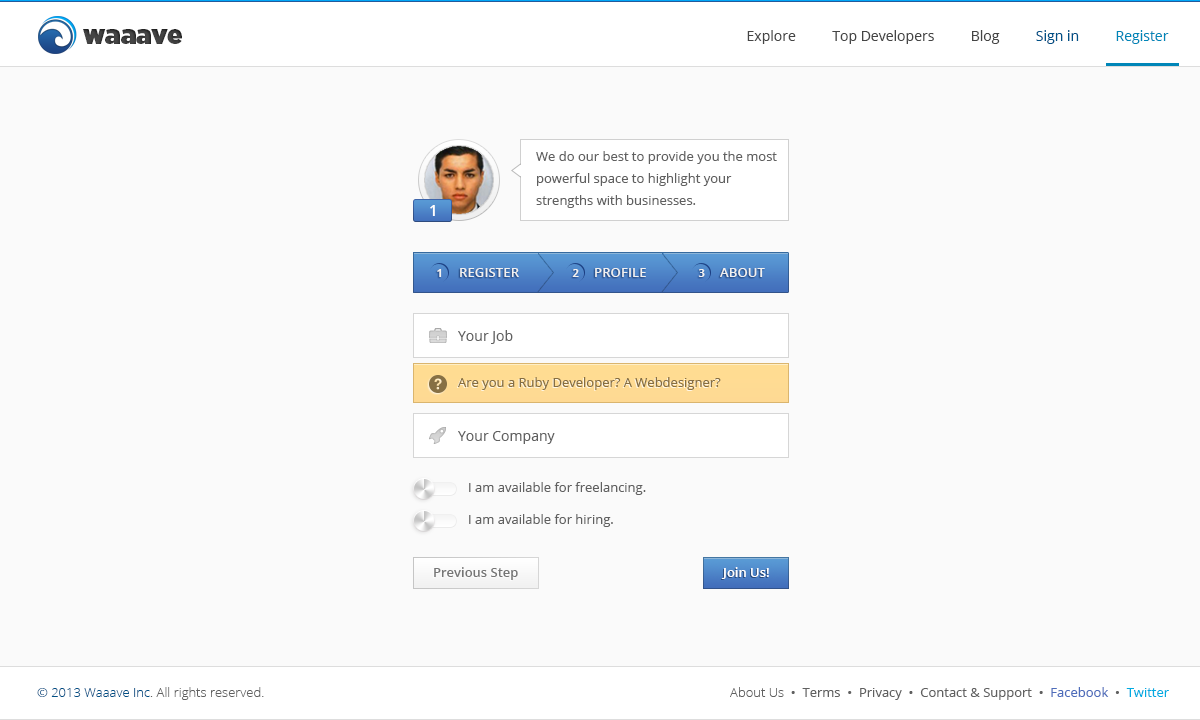
<style>
.page{position:relative;width:1200px;height:720px;background:#fafafa}
.page>*{position:absolute;margin:0}
.t1{font:25.9px "Gotham-Ultra";color:#454545}
.t2{font:14px "OpenSans";color:#454545}
.t3{font:14px "OpenSans";color:#005086}
.t4{font:14px "OpenSans";color:#0086b8}
.t5{font:13px/22px "OpenSans";color:#606060}
.t6{font:15px "OpenSans-Semibold";color:#fefefe}
.t7{font:11px "OpenSans-Bold";letter-spacing:0.01em;color:#f1f1f1}
.t8{font:13px "OpenSans-Semibold";letter-spacing:0.01em;color:#f1f1f1}
.t9{font:14px "OpenSans";color:#606060}
.t10{font:13px "OpenSans";color:#856e43}
.t11{font:13px "OpenSans";color:#606060}
.t12{font:13px "OpenSans-Semibold";color:#757575}
.t13{font:13px "OpenSans-Semibold";color:#ffffff}
.t14{font:13px "OpenSans-Light";color:#606060}
.t15{font:13px "OpenSans-Light";color:#005086}
.t16{font:13px "OpenSans";color:#4e6dbb}
.t17{font:13px "OpenSans";color:#01abe1}
</style>
<div class="page">
<p class="t1" style="left:83px;top:29px;width:99px;height:15px">waaave</p>
<p class="t2" style="left:747px;top:30px;width:422px;height:14px">Explore          Top Developers          Blog          <span class="t3">Sign in          </span><span class="t4">Register</span></p>
<p class="t5" style="left:536px;top:151px;width:241px;height:57px">We do our best to provide you the most<br>powerful space to highlight your<br>strengths with businesses.</p>
<p class="t6" style="left:430px;top:205px;width:5px;height:11px">1</p>
<p class="t7" style="left:437px;top:269px;width:5px;height:8px">1</p>
<p class="t8" style="left:460px;top:268px;width:59px;height:9px">REGISTER</p>
<p class="t7" style="left:572px;top:269px;width:7px;height:8px">2</p>
<p class="t8" style="left:595px;top:268px;width:51px;height:9px">PROFILE</p>
<p class="t7" style="left:698px;top:269px;width:7px;height:8px">3</p>
<p class="t8" style="left:720px;top:268px;width:45px;height:9px">ABOUT</p>
<p class="t9" style="left:458px;top:330px;width:55px;height:14px">Your Job</p>
<p class="t10" style="left:458px;top:377px;width:263px;height:13px">Are you a Ruby Developer? A Webdesigner?</p>
<p class="t9" style="left:458px;top:431px;width:97px;height:13px">Your Company</p>
<p class="t11" style="left:469px;top:482px;width:177px;height:13px">I am available for freelancing.</p>
<p class="t11" style="left:469px;top:514px;width:144px;height:13px">I am available for hiring.</p>
<p class="t12" style="left:434px;top:567px;width:84px;height:13px">Previous Step</p>
<p class="t13" style="left:721px;top:567px;width:48px;height:12px">Join Us!</p>
<p class="t14" style="left:37px;top:687px;width:227px;height:13px"><span class="t15">© 2013 Waaave Inc</span>. All rights reserved.</p>
<p class="t11" style="left:730px;top:687px;width:439px;height:13px"><span class="t14">About Us  </span>•  Terms  •  Privacy  •  Contact &amp; Support  •  <span class="t16">Facebook</span>  •  <span class="t17">Twitter</span></p>
</div>
